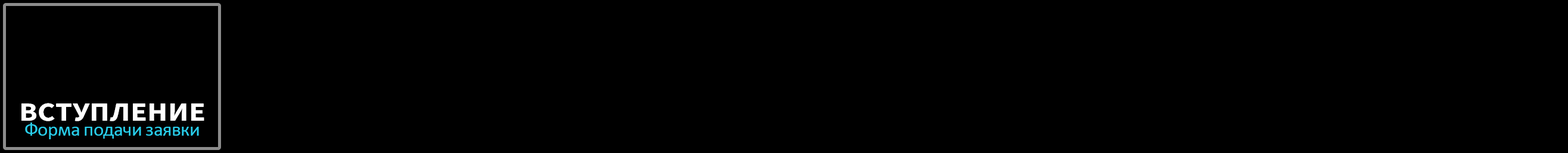
<style>
.page{position:relative;width:1568px;height:153px;background:#000000}
.page>*{position:absolute;margin:0}
.t1{font:26.2px "SourceSansRoman-Bold";letter-spacing:0.01em;color:#ffffff;scale:1.16 1}
.t2{font:19.7px "Calibri";letter-spacing:-0.02em;color:#2acfec}
</style>
<div class="page">
<p class="t1" style="left:21px;top:102px;width:183px;height:19px">ВСТУПЛЕНИЕ</p>
<p class="t2" style="left:25px;top:122px;width:174px;height:17px">Форма подачи заявки</p>
</div>
